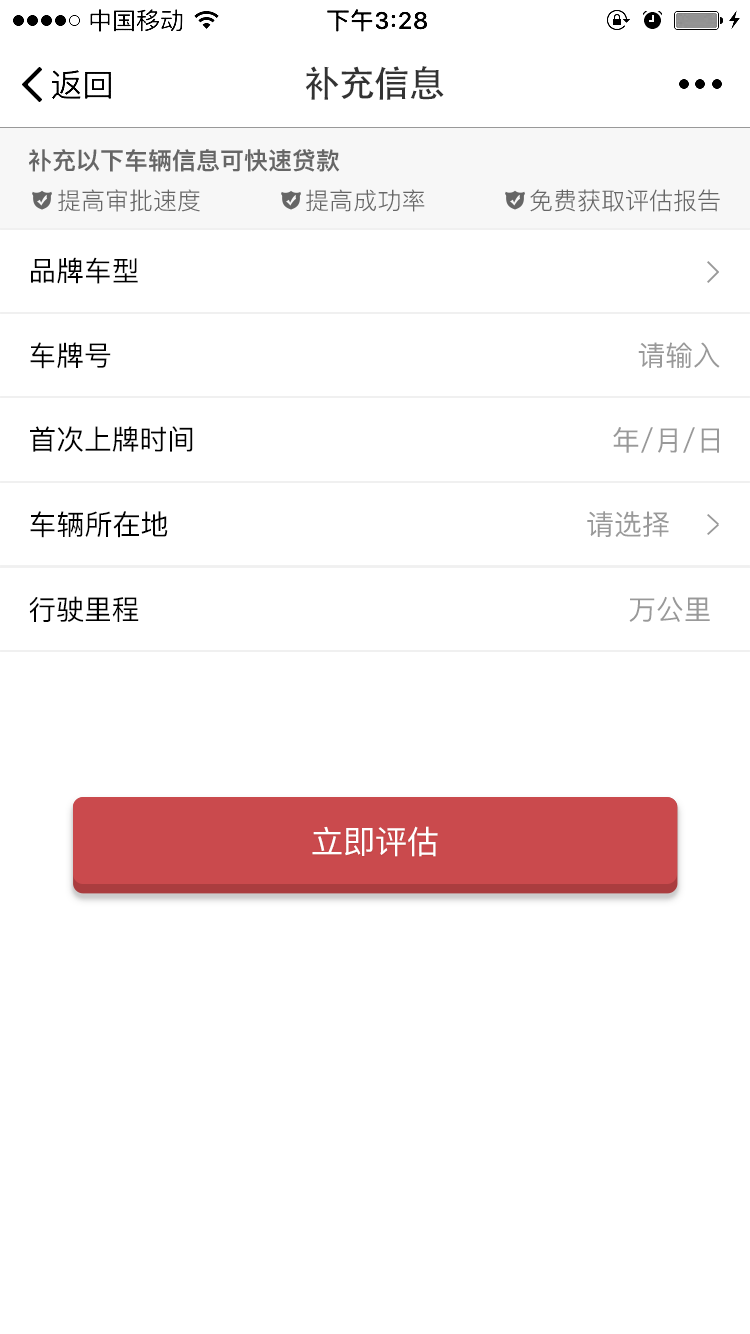
<style>
.page{position:relative;width:750px;height:1334px;background:#ffffff}
.page>*{position:absolute;margin:0}
.t1{font:36px "AdobeHeitiStd-Regular";letter-spacing:-0.02em;color:#333333}
.t2{font:24px "PingFang-SC-Heavy";color:#666666}
.t3{font:23.8px "PingFang-SC-Regular";color:#666666}
.t4{font:23.7px "PingFang-SC-Regular";color:#666666}
.t5{font:27.8px "PingFang-SC-Medium";color:#000000}
.t6{font:27.8px "PingFang-SC-Medium";color:#999999}
.t7{font:27.6px "PingFang-SC-Medium";color:#000000}
.t8{font:28px "PingFang-SC-Medium";color:#000000}
.t9{font:28px "PingFang-SC-Medium";color:#999999}
.t10{font:32px "PingFang-SC-Medium";color:#ffffff}
</style>
<div class="page">
<p class="t1" style="left:305px;top:66px;width:139px;height:34px">补充信息</p>
<p class="t2" style="left:29px;top:149px;width:311px;height:23px">补充以下车辆信息可快速贷款</p>
<p class="t3" style="left:58px;top:189px;width:142px;height:23px">提高审批速度</p>
<p class="t4" style="left:306px;top:189px;width:119px;height:23px">提高成功率</p>
<p class="t3" style="left:530px;top:189px;width:190px;height:23px">免费获取评估报告</p>
<p class="t5" style="left:31px;top:257px;width:107px;height:27px">品牌车型</p>
<p class="t5" style="left:30px;top:342px;width:690px;height:27px">车牌号                                                         <span class="t6">请输入</span></p>
<p class="t7" style="left:30px;top:426px;width:163px;height:26px">首次上牌时间</p>
<p class="t6" style="left:613px;top:427px;width:106px;height:26px">年/月/日</p>
<p class="t8" style="left:30px;top:511px;width:639px;height:27px">车辆所在地                                             <span class="t9">请选择</span></p>
<p class="t5" style="left:29px;top:596px;width:681px;height:26px">行驶里程                                                     <span class="t6">万公里</span></p>
<p class="t10" style="left:312px;top:826px;width:126px;height:31px">立即评估</p>
</div>
